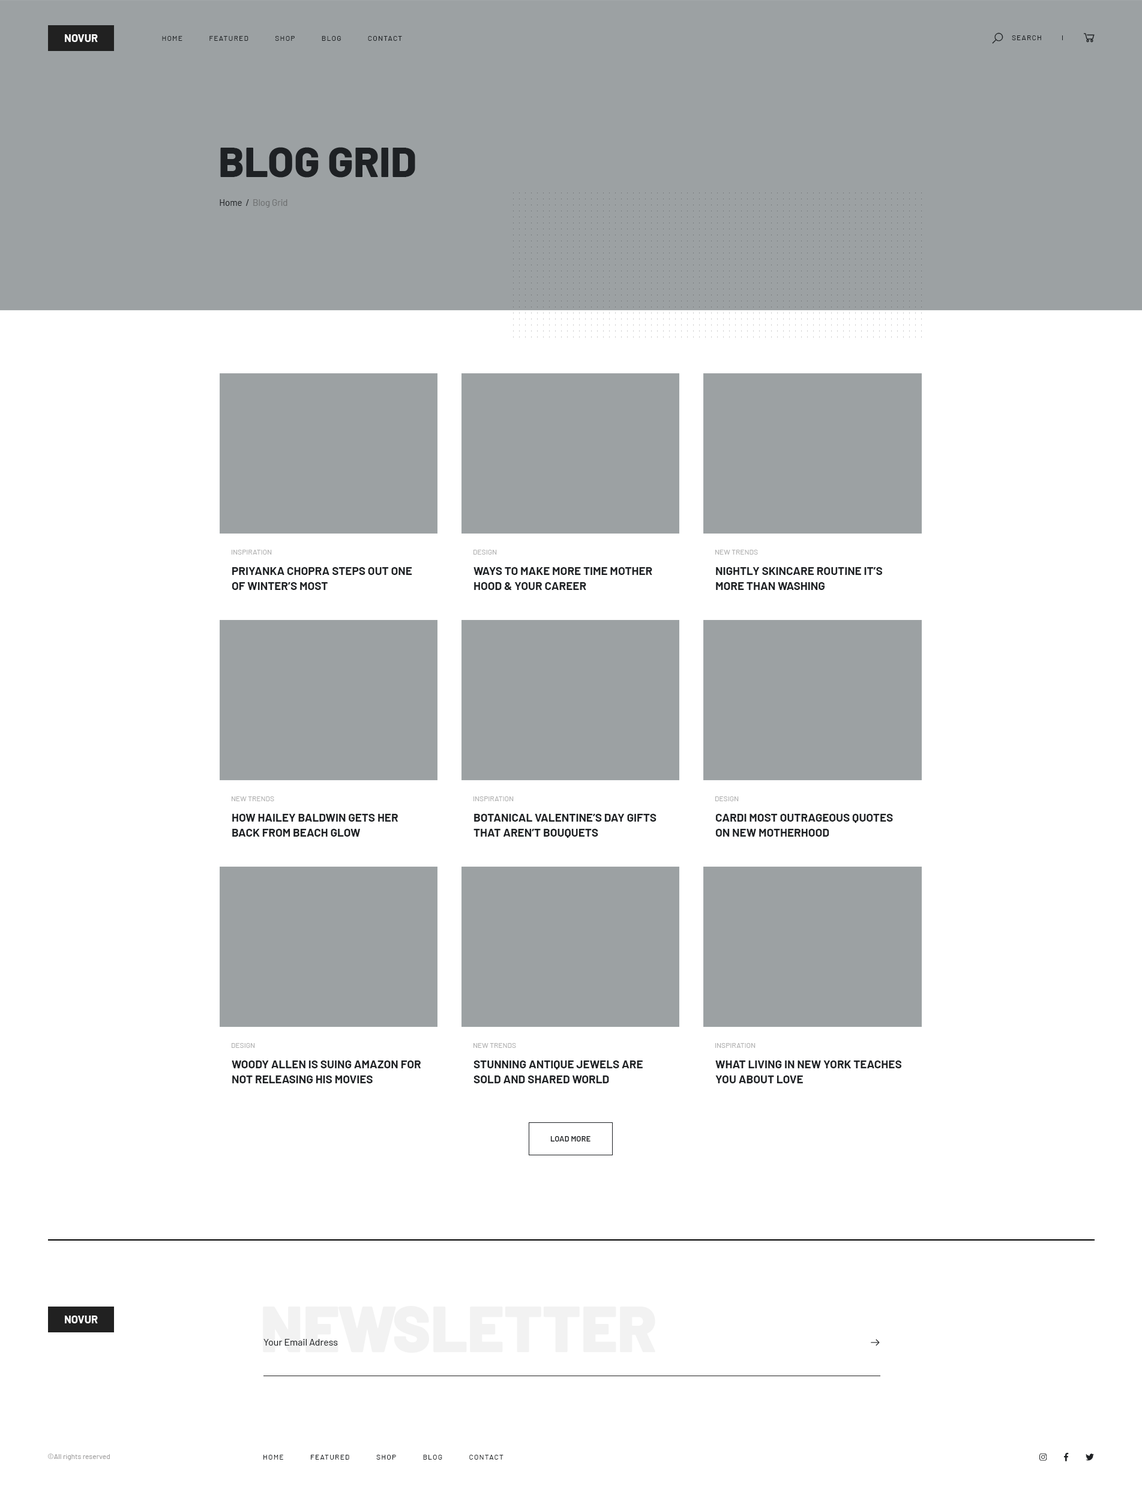
<style>
.page{position:relative;width:1142px;height:1498px;background:#ffffff}
.page>*{position:absolute;margin:0}
.t1{font:10.8px "Barlow-Bold";color:#fefefe;text-transform:uppercase}
.t2{font:7.2px "Barlow-Regular";letter-spacing:0.1em;color:#1e2124;text-transform:uppercase}
.t3{font:42px "Barlow-ExtraBold";color:#1e2124;text-transform:uppercase}
.t4{font:9px "Barlow-Regular";color:#6e7071}
.t5{font:9px "Barlow-Regular";color:#1e2124}
.t6{font:7.2px "Barlow-Regular";color:#aeaeae;text-transform:uppercase}
.t7{font:11.4px/15px "Barlow-Bold";color:#1e2124;text-transform:uppercase}
.t8{font:7.8px "Barlow-SemiBold";color:#1e2124;text-transform:uppercase}
.t9{font:64.2px "Barlow-Black";color:#f2f2f2}
.t10{font:9.6px "Barlow-Regular";color:#1e2124}
.t11{font:7.2px "Barlow-Regular";color:#9e9d9d}
</style>
<div class="page">
<p class="t1" style="left:65px;top:34px;width:33px;height:8px">novur</p>
<p class="t2" style="left:162px;top:36px;width:240px;height:5px">Home            Featured            Shop            Blog            Contact</p>
<p class="t2" style="left:1012px;top:35px;width:29px;height:5px">Search</p>
<p class="t3" style="left:220px;top:147px;width:195px;height:31px">Blog Grid</p>
<p class="t4" style="left:220px;top:199px;width:67px;height:9px"><span class="t5">Home  /</span>  Blog Grid</p>
<p class="t6" style="left:232px;top:550px;width:40px;height:4px">Inspiration</p>
<p class="t6" style="left:473px;top:550px;width:24px;height:4px">Design</p>
<p class="t6" style="left:715px;top:550px;width:43px;height:4px">New Trends</p>
<p class="t7" style="left:232px;top:567px;width:180px;height:23px">Priyanka Chopra Steps out One of Winter’s Most</p>
<p class="t7" style="left:473px;top:567px;width:179px;height:23px">Ways To Make More Time Mother hood &amp; Your Career</p>
<p class="t7" style="left:716px;top:567px;width:166px;height:23px">Nightly Skincare Routine It’s More Than Washing</p>
<p class="t6" style="left:232px;top:796px;width:42px;height:5px">New Trends</p>
<p class="t6" style="left:473px;top:796px;width:41px;height:5px">Inspiration</p>
<p class="t6" style="left:715px;top:796px;width:24px;height:5px">Design</p>
<p class="t7" style="left:232px;top:814px;width:166px;height:22px">How Hailey Baldwin Gets Her Back From Beach Glow</p>
<p class="t7" style="left:473px;top:814px;width:183px;height:24px">Botanical Valentine’s Day Gifts That Aren’t Bouquets</p>
<p class="t7" style="left:715px;top:814px;width:178px;height:22px">Cardi Most Outrageous Quotes <br>on New Motherhood</p>
<p class="t6" style="left:232px;top:1043px;width:23px;height:5px">Design</p>
<p class="t6" style="left:473px;top:1043px;width:43px;height:5px">New Trends</p>
<p class="t6" style="left:715px;top:1043px;width:40px;height:5px">Inspiration</p>
<p class="t7" style="left:232px;top:1060px;width:189px;height:23px">Woody Allen Is Suing Amazon for Not Releasing His Movies</p>
<p class="t7" style="left:473px;top:1060px;width:170px;height:23px">Stunning Antique Jewels Are Sold and Shared World</p>
<p class="t7" style="left:715px;top:1060px;width:186px;height:23px">What Living in New York Teaches You About Love</p>
<p class="t8" style="left:550px;top:1136px;width:40px;height:5px">Load More</p>
<p class="t9" style="left:263px;top:1306px;width:392px;height:46px">NEWSLETTER</p>
<p class="t1" style="left:65px;top:1315px;width:33px;height:8px">Novur</p>
<p class="t10" style="left:263px;top:1339px;width:75px;height:6px">Your Email Adress</p>
<p class="t11" style="left:48px;top:1453px;width:62px;height:7px">©All rights reserved</p>
<p class="t2" style="left:263px;top:1454px;width:240px;height:5px">Home            Featured            Shop            Blog            Contact</p>
</div>
